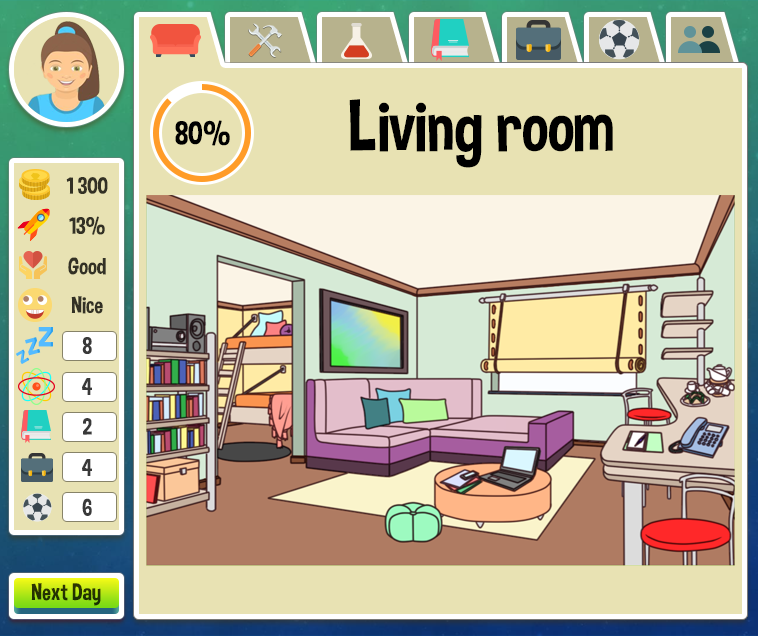
<style>
.page{position:relative;width:758px;height:636px;background:#e8e2b3}
.page>*{position:absolute;margin:0}
.t1{font:71px "DimboRegular";color:#000000}
.t2{font:33px "DimboRegular";color:#000000}
.t3{font:23.6px "DimboRegular";color:#333125}
.t4{font:23.6px "DimboRegular";color:#393939}
.t5{font:23.6px "DimboRegular";color:#243202}
</style>
<div class="page">
<p class="t1" style="left:349px;top:99px;width:264px;height:69px">Living room</p>
<p class="t2" style="left:175px;top:120px;width:55px;height:26px">80%</p>
<p class="t3" style="left:66px;top:177px;width:42px;height:17px">1 300</p>
<p class="t3" style="left:69px;top:216px;width:36px;height:19px">13%</p>
<p class="t3" style="left:68px;top:257px;width:38px;height:18px">Good</p>
<p class="t3" style="left:71px;top:296px;width:32px;height:18px">Nice</p>
<p class="t4" style="left:82px;top:337px;width:10px;height:17px">8</p>
<p class="t4" style="left:82px;top:378px;width:10px;height:17px">4</p>
<p class="t4" style="left:83px;top:418px;width:9px;height:17px">2</p>
<p class="t4" style="left:82px;top:459px;width:10px;height:17px">4</p>
<p class="t4" style="left:82px;top:498px;width:10px;height:18px">6</p>
<p class="t5" style="left:31px;top:583px;width:70px;height:23px">Next Day</p>
</div>
